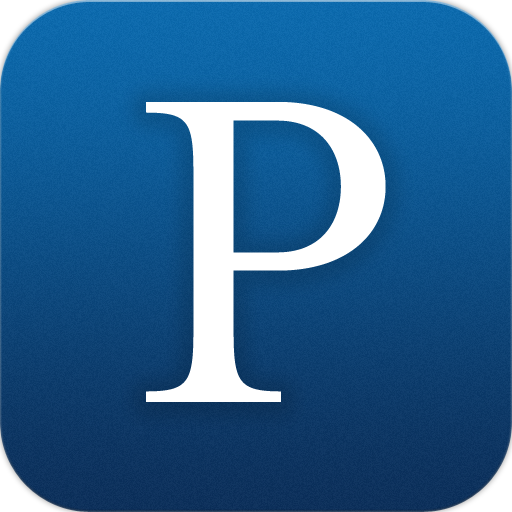
<style>
.page{position:relative;width:512px;height:512px}
.page>*{position:absolute;margin:0}
.t1{font:500px "MrsEavesSmallCapsSmallCaps";letter-spacing:-0.04em;color:#ffffff}
</style>
<div class="page">
<p class="t1" style="left:146px;top:102px;width:240px;height:300px">P</p>
</div>
